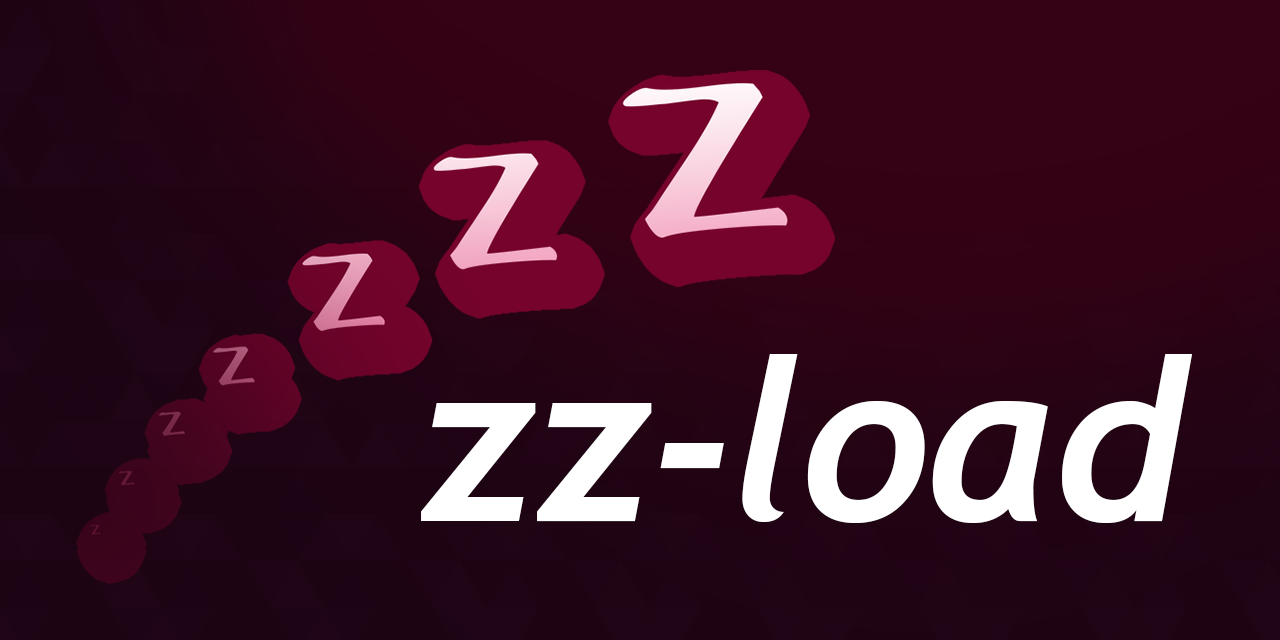
<style>
.page{position:relative;width:1280px;height:640px}
.page>*{position:absolute;margin:0}
.t1{font:225.7px "Trebuchet-BoldItalic";letter-spacing:-0.015em;color:#ffffff}
</style>
<div class="page">
<p class="t1" style="left:421px;top:354px;width:771px;height:169px">zz-load</p>
</div>
